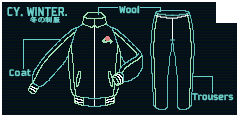
<style>
.page{position:relative;width:239px;height:117px;background:#050f1c}
.page>*{position:absolute;margin:0}
.t1{font:10.6px "Bombardier";color:#6cd1cb;scale:1.06 1}
.t2{font:14.1px "Bombardier";color:#6cd1cb}
.t3{font:14.1px "AdobeHeitiStd-Regular";color:#6cd1cb}
.t4{font:6.7px "AdobeHeitiStd-Regular";color:#6cd1cb;scale:1.13 1}
.t5{font:10.3px "Bombardier";color:#6cd1cb;scale:1.2 1}
</style>
<div class="page">
<p class="t1" style="left:119px;top:5px;width:21px;height:9px">Wool</p>
<p class="t2" style="left:7px;top:7px;width:60px;height:10px">CY<span class="t3">. </span>WINTER.</p>
<p class="t4" style="left:30px;top:16px;width:30px;height:7px">冬の制服</p>
<p class="t5" style="left:9px;top:69px;width:22px;height:8px">Coat</p>
<p class="t1" style="left:192px;top:93px;width:42px;height:8px">Trousers</p>
</div>
